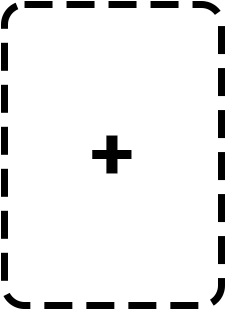
<style>
.page{position:relative;width:225px;height:309px;background:#ffffff}
.page>*{position:absolute;margin:0}
.t1{font:72px "Oddlini-ExtraBold";color:#010101}
</style>
<div class="page">
<p class="t1" style="left:92px;top:135px;width:40px;height:39px">+</p>
</div>
